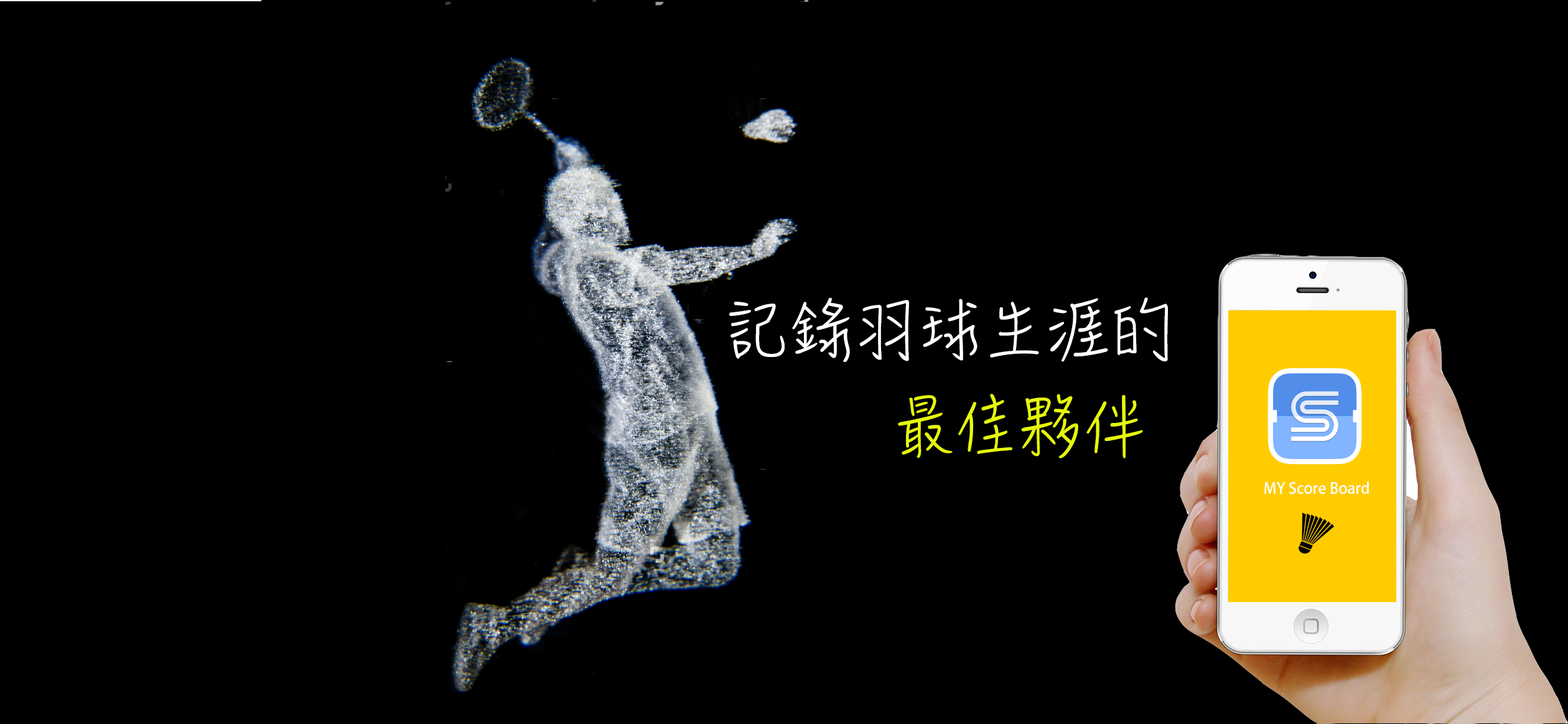
<style>
.page{position:relative;width:1568px;height:724px;background:#000000}
.page>*{position:absolute;margin:0}
.t1{font:62.2px "HanziPenTC-W3";color:#ffffff}
.t2{font:62.2px "HanziPenTC-W3";color:#e5f90c}
</style>
<div class="page">
<p class="t1" style="left:729px;top:297px;width:439px;height:65px">記錄羽球生涯的</p>
<p class="t2" style="left:898px;top:394px;width:245px;height:65px">最佳夥伴</p>
</div>
